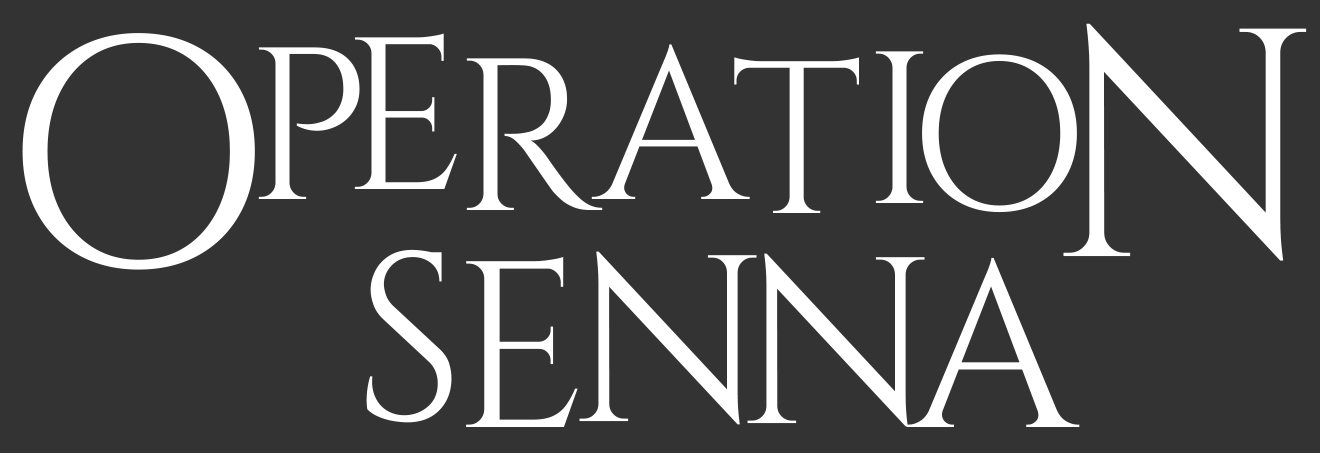
<style>
.page{position:relative;width:1320px;height:453px;background:#333333}
.page>*{position:absolute;margin:0}
.t1{font:324.8px "Cinzel-Regular";color:#ffffff}
.t2{font:216.5px "Cinzel-Regular";color:#ffffff}
.t3{font:236.8px "Cinzel-Regular";color:#ffffff}
</style>
<div class="page">
<p class="t1" style="left:1063px;top:23px;width:244px;height:238px">N</p>
<p class="t1" style="left:22px;top:33px;width:233px;height:237px">O</p>
<p class="t2" style="left:354px;top:33px;width:103px;height:156px">E</p>
<p class="t2" style="left:258px;top:47px;width:102px;height:152px">P</p>
<p class="t2" style="left:591px;top:44px;width:159px;height:155px">A</p>
<p class="t2" style="left:875px;top:51px;width:49px;height:152px">I</p>
<p class="t2" style="left:922px;top:54px;width:155px;height:159px">O</p>
<p class="t2" style="left:466px;top:58px;width:137px;height:152px">R</p>
<p class="t2" style="left:734px;top:57px;width:125px;height:156px">T</p>
<p class="t3" style="left:366px;top:249px;width:86px;height:174px">S</p>
<p class="t3" style="left:466px;top:256px;width:112px;height:171px">E</p>
<p class="t3" style="left:579px;top:251px;width:178px;height:174px">N</p>
<p class="t3" style="left:747px;top:253px;width:178px;height:174px">N</p>
<p class="t3" style="left:906px;top:257px;width:174px;height:170px">A</p>
</div>
